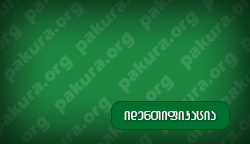
<style>
.page{position:relative;width:250px;height:144px}
.page>*{position:absolute;margin:0}
.t1{font:14px "BabukaMtavruli";color:#ffffff}
</style>
<div class="page">
<p class="t1" style="left:124px;top:111px;width:92px;height:9px">idenTifikacia</p>
</div>
